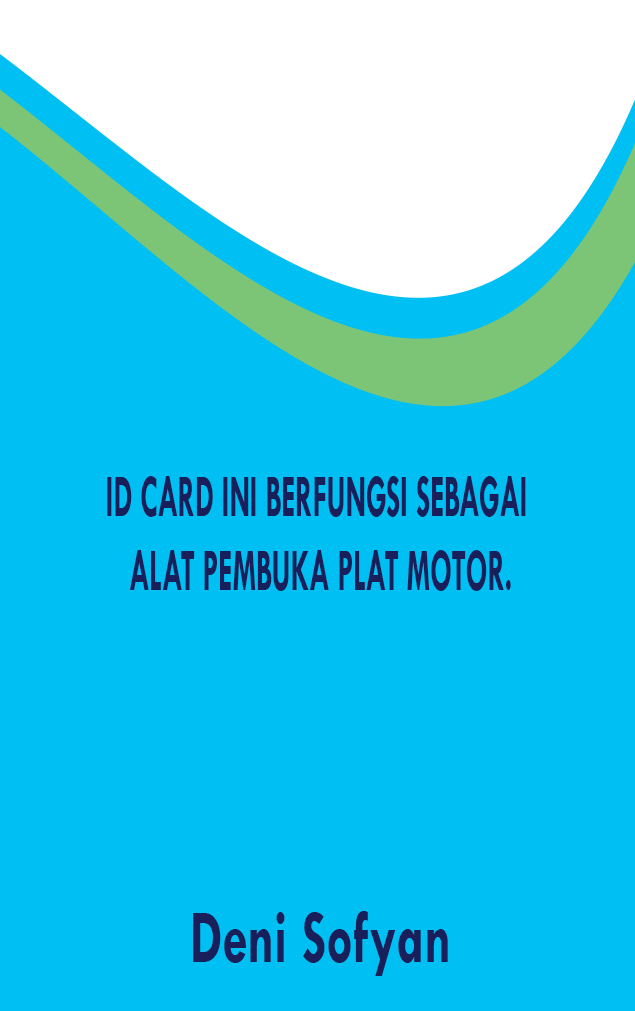
<style>
.page{position:relative;width:635px;height:1011px;background:#00bff3}
.page>*{position:absolute;margin:0}
.t1{font:61.2px "TwCenMT-Bold";color:#181f5a;scale:0.48 1}
.t2{font:76.9px "TwCenMT-Bold";color:#181f5a;scale:0.67 1}
</style>
<div class="page">
<p class="t1" style="left:107px;top:476px;width:419px;height:115px;text-align:center">ID CARD INI BERFUNGSI SEBAGAI <br>ALAT PEMBUKA PLAT MOTOR.</p>
<p class="t2" style="left:193px;top:911px;width:255px;height:65px">Deni Sofyan</p>
</div>
